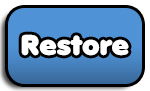
<style>
.page{position:relative;width:150px;height:91px;background:#4f92d6}
.page>*{position:absolute;margin:0}
.t1{font:28.1px "Debussy";color:#ffffff}
</style>
<div class="page">
<p class="t1" style="left:21px;top:34px;width:108px;height:22px">Restore</p>
</div>
